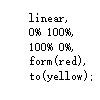
<style>
.page{position:relative;width:100px;height:100px;background:#ffffff}
.page>*{position:absolute;margin:0}
.t1{font:12px "SimSun";color:#000000}
</style>
<div class="page">
<p class="t1" style="left:29px;top:13px;width:63px;height:69px">linear,<br>0% 100%,<br>100% 0%,<br>form(red),<br>to(yellow);</p>
</div>
